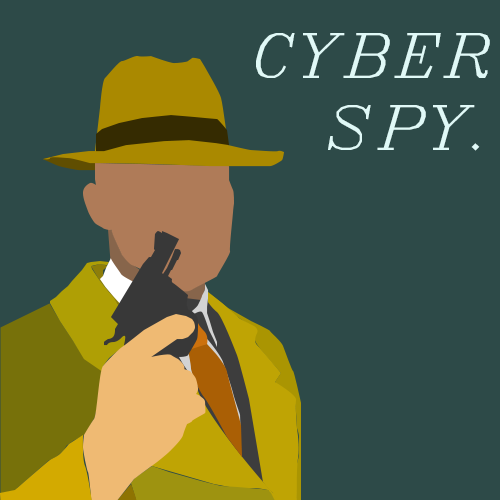
<style>
.page{position:relative;width:500px;height:500px;background:#2d4a48}
.page>*{position:absolute;margin:0}
.t1{font:60px "Italic_IV25";color:#e0f9f7}
</style>
<div class="page">
<p class="t1" style="left:256px;top:33px;width:234px;height:118px">CYBER<br>  SPY.</p>
</div>
